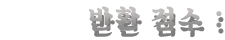
<style>
.page{position:relative;width:225px;height:40px;background:#ffffff}
.page>*{position:absolute;margin:0}
.t1{font:26.9px "SDKukdetopokki-bBd";letter-spacing:0.08em;color:#9f9c9c}
</style>
<div class="page">
<p class="t1" style="left:88px;top:6px;width:134px;height:26px">반환 점수 :</p>
</div>
